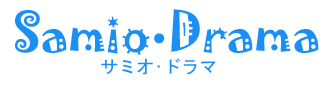
<style>
.page{position:relative;width:332px;height:90px;background:#ffffff}
.page>*{position:absolute;margin:0}
.t1{font:48px "Jokerman-Regular";color:#1c90f2}
.t2{font:30px "Jokerman-Regular";color:#1c90f2}
.t3{font:18px "MS-Gothic";color:#1c90f2}
.t4{font:18px "Jokerman-Regular";color:#1c90f2}
</style>
<div class="page">
<p class="t1" style="left:15px;top:9px;width:304px;height:46px">Samio<span class="t2">•</span>Drama</p>
<p class="t3" style="left:101px;top:58px;width:115px;height:17px"><span class="t2">サミオドラ</span><span class="t4">マズ</span>サミオ•ドラマ</p>
</div>
